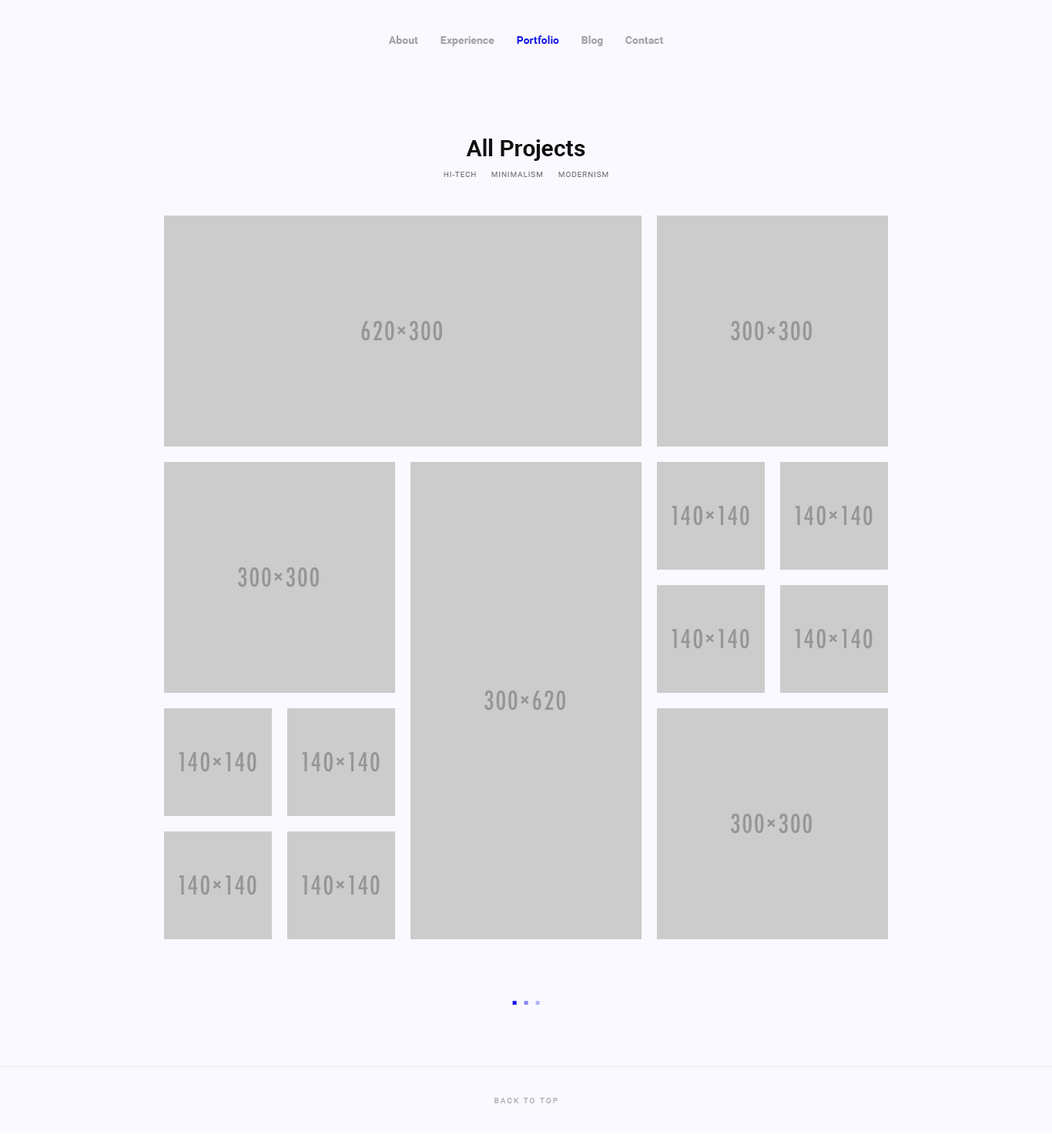
<style>
.page{position:relative;width:1052px;height:1134px;background:#f9f9ff}
.page>*{position:absolute;margin:0}
.t1{font:10.8px "Roboto-Bold";color:#a2a2a6}
.t2{font:10.8px "Roboto-Bold";color:#1313e8}
.t3{font:23.1px "Roboto-Bold";color:#111111}
.t4{font:7.7px "Roboto-Regular";letter-spacing:0.075em;color:#767679;text-transform:uppercase}
.t5{font:7.7px "Roboto-Regular";letter-spacing:0.2em;color:#a2a2a6;text-transform:uppercase}
</style>
<div class="page">
<p class="t1" style="left:388px;top:35px;width:30px;height:9px">About</p>
<p class="t1" style="left:440px;top:36px;width:54px;height:10px">Experience</p>
<p class="t2" style="left:517px;top:35px;width:42px;height:9px">Portfolio</p>
<p class="t1" style="left:581px;top:35px;width:22px;height:11px">Blog</p>
<p class="t1" style="left:625px;top:36px;width:39px;height:8px">Contact</p>
<p class="t3" style="left:466px;top:139px;width:119px;height:22px">All Projects</p>
<p class="t4" style="left:443px;top:172px;width:33px;height:5px">Hi-Tech</p>
<p class="t4" style="left:491px;top:172px;width:52px;height:5px">Minimalism</p>
<p class="t4" style="left:558px;top:172px;width:50px;height:5px">Modernism</p>
<p class="t5" style="left:494px;top:1098px;width:63px;height:5px">back to top</p>
</div>
